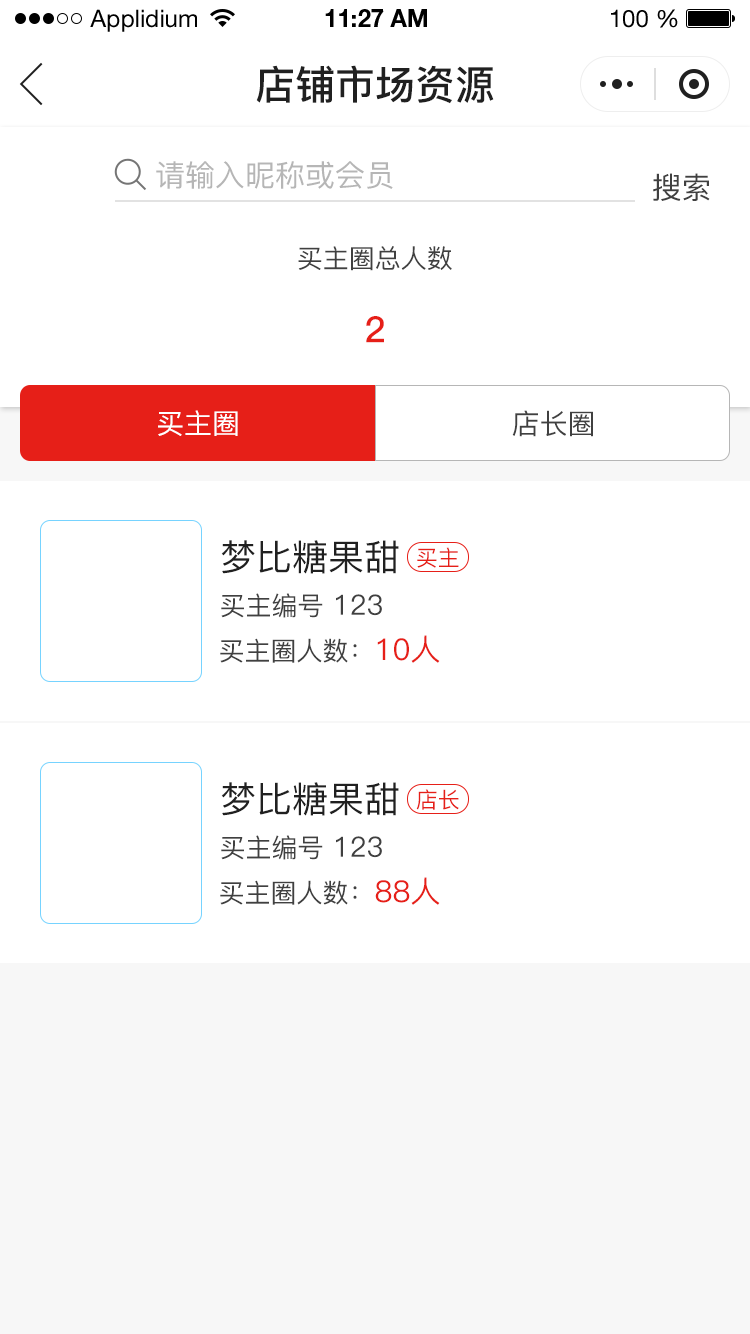
<style>
.page{position:relative;width:750px;height:1334px;background:#ffffff}
.page>*{position:absolute;margin:0}
.t1{font:24px "HelveticaNeueLTStd-Roman";color:#000000}
.t2{font:24px "HelveticaNeueLTStd-Bd";color:#000000}
.t3{font:40px "PingFang-SC-Bold";color:#202020;text-transform:uppercase}
.t4{font:30px "PingFang-SC-Medium";color:#b6b6b6;text-transform:uppercase}
.t5{font:30px "PingFang-SC-Medium";color:#404040;text-transform:uppercase}
.t6{font:26px "PingFang-SC-Medium";color:#404040;text-transform:uppercase}
.t7{font:36px "PingFang-SC-Bold";color:#e61f18;text-transform:uppercase}
.t8{font:28px "PingFang-SC-Medium";color:#ffffff;text-transform:uppercase}
.t9{font:28px "PingFang-SC-Medium";color:#404040;text-transform:uppercase}
.t10{font:36px "PingFang-SC-Medium";color:#202020;text-transform:uppercase}
.t11{font:22px "PingFang-SC-Medium";color:#e61f18;text-transform:uppercase}
.t12{font:30px "PingFang-SC-Medium";color:#e61f18;text-transform:uppercase}
</style>
<div class="page">
<p class="t1" style="left:90px;top:9px;width:107px;height:23px">Applidium</p>
<p class="t2" style="left:325px;top:9px;width:102px;height:18px">11:27 AM</p>
<p class="t1" style="left:611px;top:9px;width:67px;height:19px">100 %</p>
<p class="t3" style="left:256px;top:65px;width:238px;height:39px">店铺市场资源</p>
<p class="t4" style="left:156px;top:161px;width:237px;height:28px">请输入昵称或会员</p>
<p class="t5" style="left:653px;top:173px;width:57px;height:28px">搜索</p>
<p class="t6" style="left:298px;top:246px;width:154px;height:25px">买主圈总人数</p>
<p class="t7" style="left:366px;top:316px;width:18px;height:27px">2</p>
<p class="t8" style="left:158px;top:410px;width:80px;height:26px">买主圈</p>
<p class="t9" style="left:512px;top:410px;width:81px;height:27px">店长圈</p>
<p class="t10" style="left:221px;top:540px;width:178px;height:34px">梦比糖果甜</p>
<p class="t11" style="left:417px;top:547px;width:42px;height:21px">买主</p>
<p class="t6" style="left:221px;top:593px;width:161px;height:25px">买主编号<span class="t9"> 123</span></p>
<p class="t6" style="left:220px;top:635px;width:220px;height:28px">买主圈人数：<span class="t12">10人</span></p>
<p class="t10" style="left:221px;top:782px;width:178px;height:34px">梦比糖果甜</p>
<p class="t11" style="left:416px;top:789px;width:43px;height:21px">店长</p>
<p class="t6" style="left:221px;top:835px;width:161px;height:25px">买主编号<span class="t9"> 123</span></p>
<p class="t6" style="left:220px;top:877px;width:220px;height:28px">买主圈人数：<span class="t12">88人</span></p>
</div>
